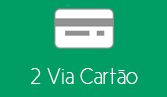
<style>
.page{position:relative;width:167px;height:97px;background:#009e64}
.page>*{position:absolute;margin:0}
.t1{font:22.7px "CicleFina";color:#ffffff}
</style>
<div class="page">
<p class="t1" style="left:31px;top:68px;width:107px;height:16px">2 Via Cartão</p>
</div>
